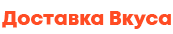
<style>
.page{position:relative;width:173px;height:34px;background:#ffffff}
.page>*{position:absolute;margin:0}
.t1{font:20px "Mont-HeavyDEMO";color:#ff4c24}
</style>
<div class="page">
<p class="t1" style="left:2px;top:11px;width:169px;height:18px">Доставка Вкуса</p>
</div>
